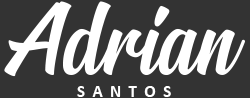
<style>
.page{position:relative;width:250px;height:98px;background:#333333}
.page>*{position:absolute;margin:0}
.t1{font:81.9px "SignatraDEMO";color:#ffffff}
.t2{font:12px "Calibri-Bold";color:#ffffff}
</style>
<div class="page">
<p class="t1" style="left:4px;top:1px;width:241px;height:76px">Adrian</p>
<p class="t2" style="left:77px;top:86px;width:94px;height:11px">S  A  N  T  O  S</p>
</div>
